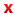
<style>
.page{position:relative;width:15px;height:15px;background:#ffffff}
.page>*{position:absolute;margin:0}
.t1{font:18px "MyriadPro-Bold"}
</style>
<div class="page">
<p class="t1" style="left:3px;top:4px;width:10px;height:9px">x</p>
</div>
